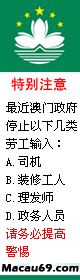
<style>
.page{position:relative;width:80px;height:280px;background:#ffffff}
.page>*{position:absolute;margin:0}
.t1{font:14px "SimHei";color:#ff0000}
.t2{font:12px/18px "SimSun";color:#000000}
.t3{font:12px/18px "SimSun";color:#ff0000}
</style>
<div class="page">
<p class="t1" style="left:11px;top:77px;width:56px;height:14px">特别注意</p>
<p class="t2" style="left:6px;top:102px;width:71px;height:155px">最近澳门政府<br>停止以下几类<br>劳工输入：<br>A.司机<br>B.装修工人<br>C.理发师<br>D.政务人员<br><span class="t3">请务必提高<br>警惕</span></p>
</div>
